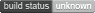
<style>
.page{position:relative;width:95px;height:13px}
.page>*{position:absolute;margin:0}
.t1{font:10px "ArialMT";color:#cccccc;scale:0.9 1}
.t2{font:10px "ArialMT";color:#ffffff;scale:0.9 1}
</style>
<div class="page">
<p class="t1" style="left:4px;top:2px;width:46px;height:7px">build status</p>
<p class="t2" style="left:56px;top:2px;width:36px;height:7px">unknown</p>
</div>
